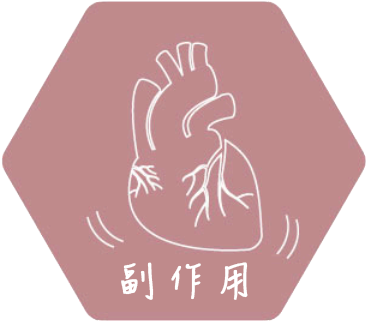
<style>
.page{position:relative;width:367px;height:322px;background:#bf8a8b}
.page>*{position:absolute;margin:0}
.t1{font:46.9px "DFHsiu-W3-WIN-BF";letter-spacing:0.01em;color:#ffffff;font-weight:bold}
</style>
<div class="page">
<p class="t1" style="left:121px;top:262px;width:127px;height:38px">副作用</p>
</div>
